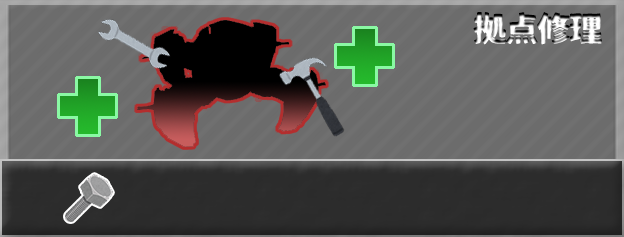
<style>
.page{position:relative;width:624px;height:237px;background:#6c6c6c}
.page>*{position:absolute;margin:0}
.t1{font:33.7px "07TetsubinGothic";letter-spacing:-0.05em}
</style>
<div class="page">
<p class="t1" style="left:473px;top:12px;width:129px;height:33px">拠点修理</p>
</div>
